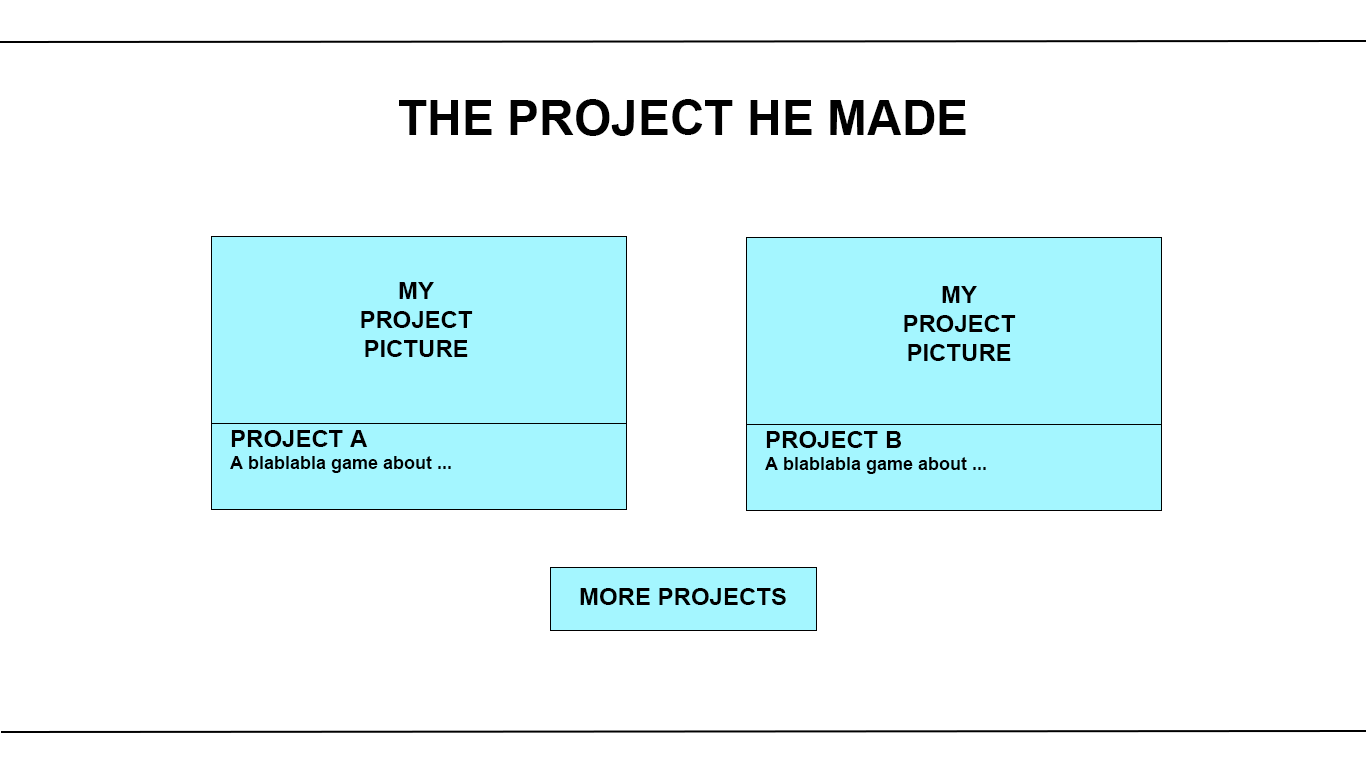
<style>
.page{position:relative;width:1366px;height:768px;background:#ffffff}
.page>*{position:absolute;margin:0}
.t1{font:48px "Arial-BoldMT";color:#000000}
.t2{font:24px "Arial-BoldMT";color:#000000}
.t3{font:18px "Arial-BoldMT";color:#000000}
</style>
<div class="page">
<p class="t1" style="left:399px;top:99px;width:567px;height:37px">THE PROJECT HE MADE</p>
<p class="t2" style="left:361px;top:282px;width:112px;height:75px;text-align:center">MY<br>PROJECT PICTURE</p>
<p class="t2" style="left:904px;top:286px;width:112px;height:75px;text-align:center">MY<br>PROJECT PICTURE</p>
<p class="t3" style="left:230px;top:430px;width:221px;height:43px"><span class="t2">PROJECT A<br></span>A blablabla game about ...</p>
<p class="t3" style="left:765px;top:431px;width:221px;height:43px"><span class="t2">PROJECT B<br></span>A blablabla game about ...</p>
<p class="t2" style="left:580px;top:588px;width:206px;height:17px">MORE PROJECTS</p>
</div>
